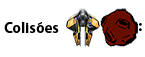
<style>
.page{position:relative;width:145px;height:57px;background:#ffffff}
.page>*{position:absolute;margin:0}
.t1{font:15.1px "MyriadPro-Bold";color:#000000}
.t2{font:6.8px "MyriadPro-Bold";color:#000000}
.t3{font:9.1px "MyriadPro-Bold";color:#000000}
</style>
<div class="page">
<p class="t1" style="left:4px;top:22px;width:55px;height:11px"><span class="t2"><br><br></span>Colisões</p>
<p class="t1" style="left:139px;top:23px;width:3px;height:8px"><span class="t3"><br></span>:</p>
</div>
